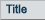
<style>
.page{position:relative;width:45px;height:20px;background:#d9dde0}
.page>*{position:absolute;margin:0}
.t1{font:12px "ArialNarrow";color:#103852;font-weight:bold;scale:1.05 1}
</style>
<div class="page">
<p class="t1" style="left:6px;top:4px;width:21px;height:10px">Title</p>
</div>
